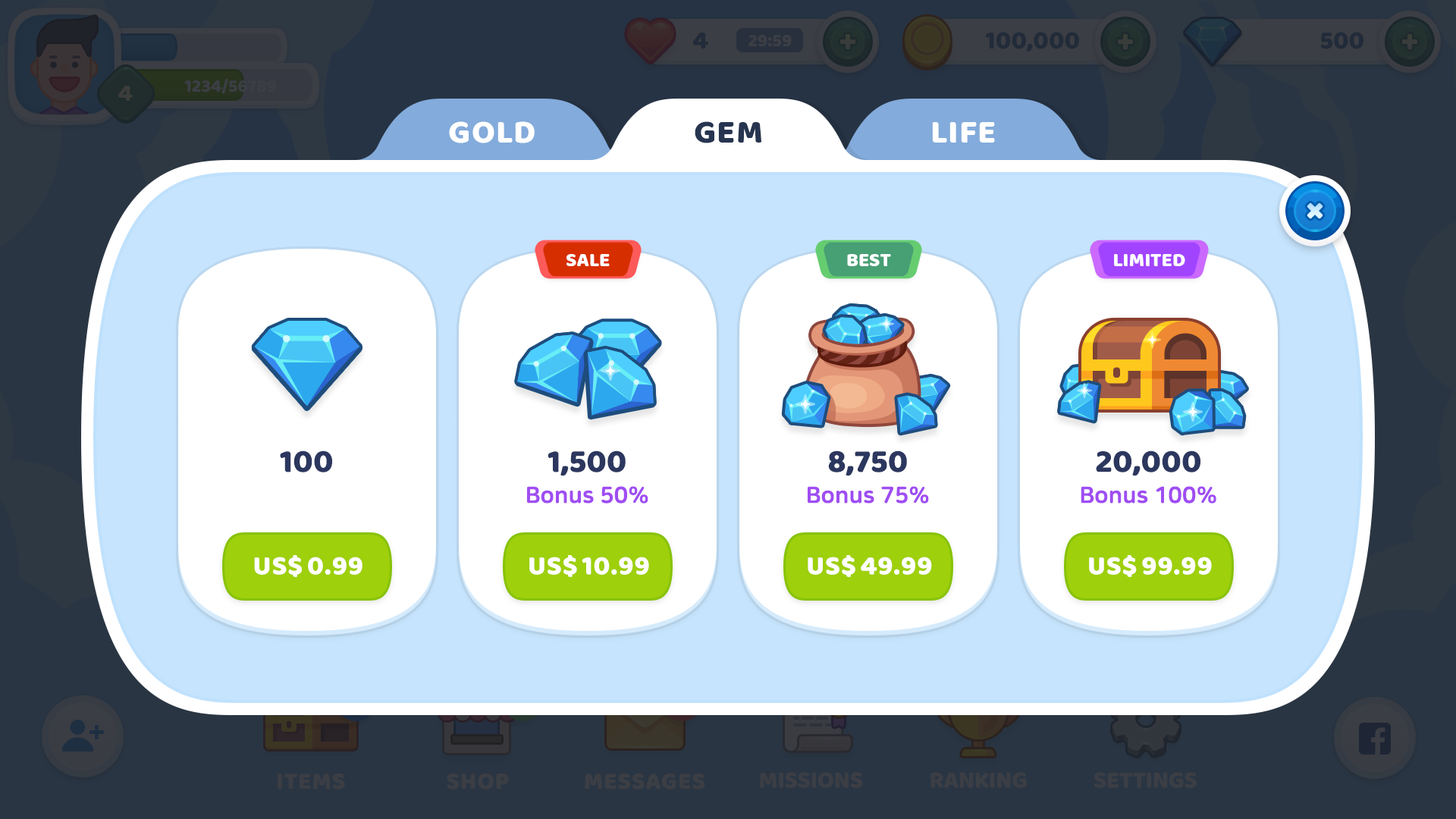
<style>
.page{position:relative;width:1456px;height:819px;background:#ffffff}
.page>*{position:absolute;margin:0}
.t1{font:33.6px "BalooBhaijaan-Regular";color:#ffffff;text-transform:uppercase}
.t2{font:33.6px "BalooBhaijaan-Regular";color:#273550;text-transform:uppercase}
.t3{font:19.7px "BalooBhaijaan-Regular";color:#ffffff;text-transform:uppercase}
.t4{font:33.4px "BalooBhaijaan-Regular";color:#2c375f}
.t5{font:22.7px "NanumSquareRoundOTFEB";color:#9f4df2}
.t6{font:27.3px "BalooBhaijaan-Regular";color:#ffffff;text-transform:uppercase}
</style>
<div class="page">
<p class="t1" style="left:449px;top:121px;width:86px;height:22px">Gold</p>
<p class="t2" style="left:695px;top:121px;width:66px;height:22px">Gem</p>
<p class="t1" style="left:932px;top:122px;width:63px;height:21px">life</p>
<p class="t3" style="left:566px;top:254px;width:44px;height:12px">sale</p>
<p class="t3" style="left:847px;top:254px;width:44px;height:12px">Best</p>
<p class="t3" style="left:1114px;top:254px;width:71px;height:12px">limited</p>
<p class="t4" style="left:280px;top:450px;width:53px;height:22px">100</p>
<p class="t4" style="left:548px;top:450px;width:78px;height:26px">1,500</p>
<p class="t4" style="left:828px;top:450px;width:79px;height:26px">8,750</p>
<p class="t4" style="left:1096px;top:450px;width:105px;height:26px">20,000</p>
<p class="t5" style="left:527px;top:486px;width:121px;height:18px">Bonus 50%</p>
<p class="t5" style="left:808px;top:486px;width:121px;height:18px">Bonus 75%</p>
<p class="t5" style="left:1081px;top:486px;width:135px;height:18px">Bonus 100%</p>
<p class="t6" style="left:254px;top:555px;width:108px;height:22px">us$ 0.99</p>
<p class="t6" style="left:529px;top:555px;width:120px;height:22px">us$ 10.99</p>
<p class="t6" style="left:808px;top:555px;width:124px;height:22px">us$ 49.99</p>
<p class="t6" style="left:1089px;top:555px;width:123px;height:22px">us$ 99.99</p>
</div>
